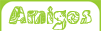
<style>
.page{position:relative;width:101px;height:31px;background:#ffffff}
.page>*{position:absolute;margin:0}
.t1{font:18px "SwirledBRK";color:#99cc33}
</style>
<div class="page">
<p class="t1" style="left:8px;top:6px;width:84px;height:24px">Amigos</p>
</div>
